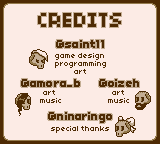
<style>
.page{position:relative;width:160px;height:144px;background:#fcebe5}
.page>*{position:absolute;margin:0}
.t1{font:22.4px "Fiery-Font-of-Force";color:#4e2b04}
.t2{font:12.1px "Fiery-Font-of-Force";color:#4e2b04}
.t3{font:8px "Fiery-Font-of-Force";color:#4e2b04}
.t4{font:11.9px "Fiery-Font-of-Force";color:#4e2b04}
</style>
<div class="page">
<p class="t1" style="left:38px;top:13px;width:83px;height:14px">CREDITS</p>
<p class="t2" style="left:56px;top:40px;width:48px;height:8px">@saint11</p>
<p class="t3" style="left:55px;top:53px;width:49px;height:7px">game design</p>
<p class="t3" style="left:55px;top:61px;width:51px;height:7px">programming</p>
<p class="t3" style="left:74px;top:69px;width:12px;height:5px">art</p>
<p class="t2" style="left:21px;top:79px;width:59px;height:8px">@amora_b</p>
<p class="t2" style="left:99px;top:79px;width:40px;height:8px">@oizeh</p>
<p class="t3" style="left:40px;top:98px;width:21px;height:5px">music</p>
<p class="t3" style="left:43px;top:90px;width:12px;height:5px">art</p>
<p class="t3" style="left:108px;top:98px;width:21px;height:5px">music</p>
<p class="t3" style="left:112px;top:90px;width:12px;height:5px">art</p>
<p class="t4" style="left:48px;top:112px;width:64px;height:11px">@ninaringo</p>
<p class="t3" style="left:51px;top:126px;width:58px;height:7px">special thanks</p>
</div>
